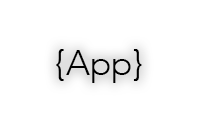
<style>
.page{position:relative;width:200px;height:133px;background:#ffffff}
.page>*{position:absolute;margin:0}
.t1{font:34.6px "Avenir-Light";color:#000000}
</style>
<div class="page">
<p class="t1" style="left:56px;top:49px;width:86px;height:34px">{App}</p>
</div>
